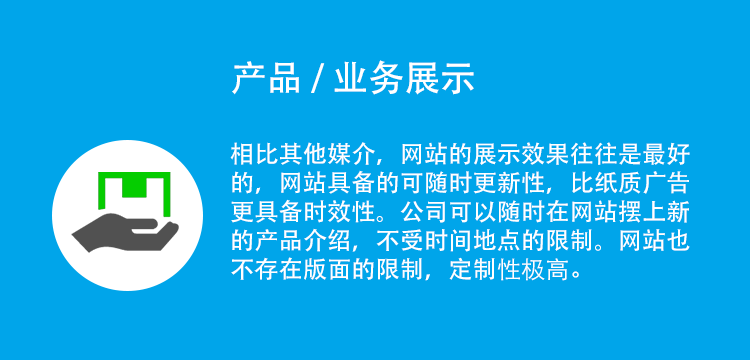
<style>
.page{position:relative;width:750px;height:360px;background:#00a5ea}
.page>*{position:absolute;margin:0}
.t1{font:36px "AdobeHeitiStd-Regular";color:#ffffff}
.t2{font:24px "AdobeHeitiStd-Regular";color:#ffffff}
.t3{font:24px "STHeitiSC-Light";color:#ffffff}
</style>
<div class="page">
<p class="t1" style="left:232px;top:60px;width:242px;height:35px">产品 / 业务展示</p>
<p class="t2" style="left:230px;top:142px;width:460px;height:139px">相比其他媒介，网站的展示效果往往是最好的，网站具备的可随时更新性，比纸质广告更具备时效性。公司可以随时在网站摆上新的产品介绍，不受时间地点的限制。网站也不存在版面的限制，定制<span class="t3">性极高。</span></p>
</div>
